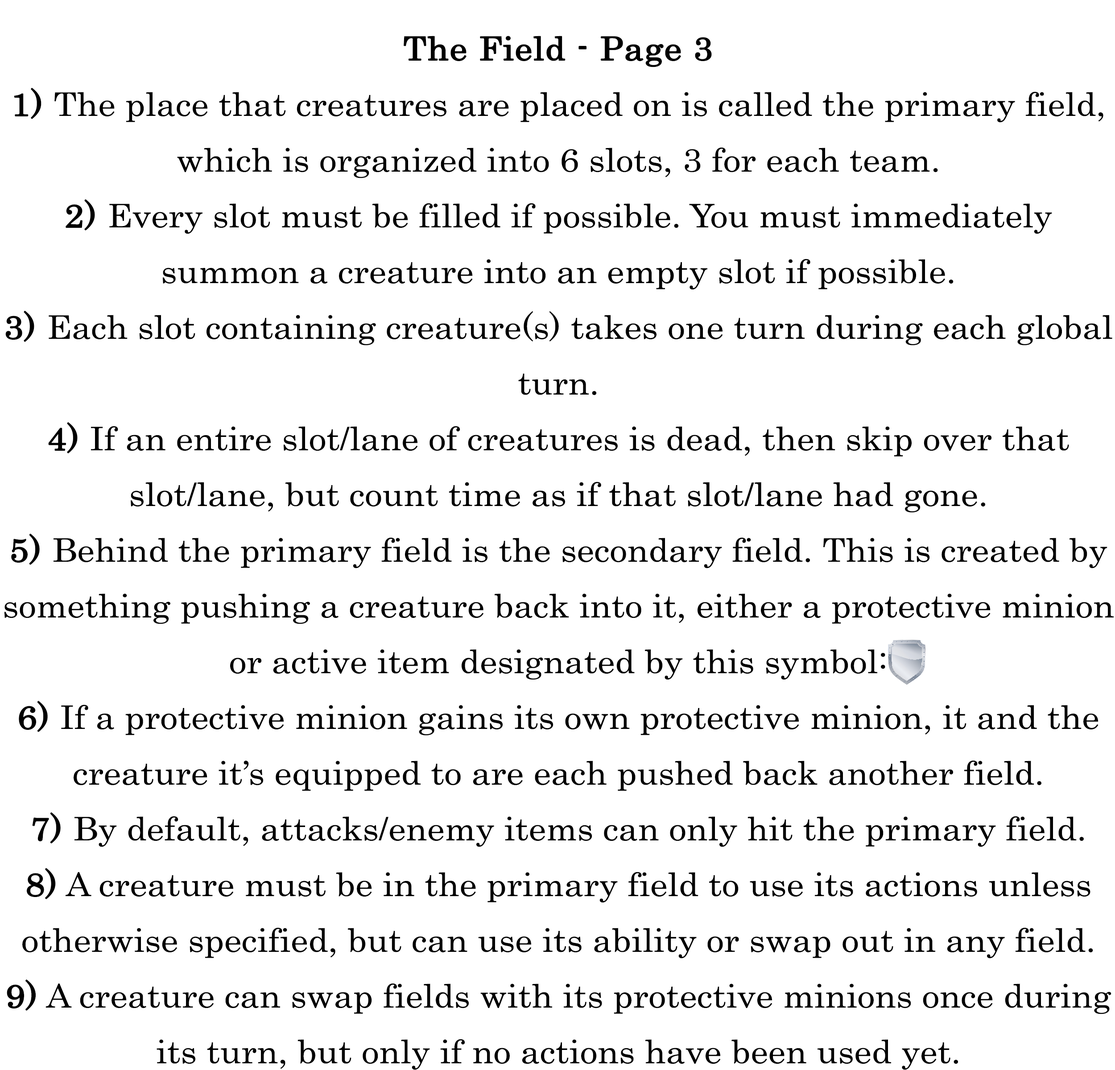
<style>
.page{position:relative;width:1115px;height:1070px;background:#ffffff}
.page>*{position:absolute;margin:0}
.t1{font:55.7px/55.7px "Century";color:#000000;scale:1.07 1}
.t2{font:55.7px/55.7px "Century";color:#000000;font-weight:bold;scale:1.07 1}
</style>
<div class="page">
<p class="t1" style="left:4px;top:36px;width:1109px;height:1034px;text-align:center"><span class="t2">The Field - Page 3<br>1)</span> The place that creatures are placed on is called the primary field, which is organized into 6 slots, 3 for each team.<br><span class="t2">2)</span> Every slot must be filled if possible. You must immediately summon a creature into an empty slot if possible.<br><span class="t2">3)</span> Each slot containing creature(s) takes one turn during each global turn.<br><span class="t2">4)</span> If an entire slot/lane of creatures is dead, then skip over that slot/lane, but count time as if that slot/lane had gone.<br><span class="t2">5)</span> Behind the primary field is the secondary field. This is created by something pushing a creature back into it, either a protective minion or active item designated by this symbol:<br><span class="t2">6)</span> If a protective minion gains its own protective minion, it and the creature it’s equipped to are each pushed back another field.<br><span class="t2">7)</span> By default, attacks/enemy items can only hit the primary field.<br><span class="t2">8)</span> A creature must be in the primary field to use its actions unless otherwise specified, but can use its ability or swap out in any field.<br><span class="t2">9)</span> A creature can swap fields with its protective minions once during its turn, but only if no actions have been used yet.</p>
</div>
